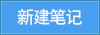
<style>
.page{position:relative;width:100px;height:35px;background:#489fef}
.page>*{position:absolute;margin:0}
.t1{font:17px "SimHei";letter-spacing:-0.05em;color:#ffffff}
</style>
<div class="page">
<p class="t1" style="left:17px;top:8px;width:65px;height:17px">新建笔记</p>
</div>
